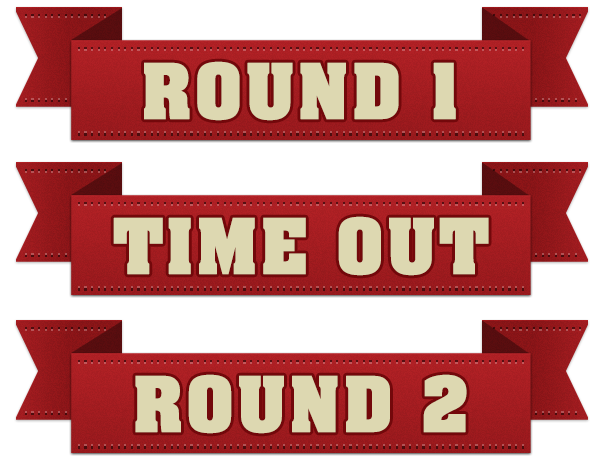
<style>
.page{position:relative;width:604px;height:465px;background:#ffffff}
.page>*{position:absolute;margin:0}
.t1{font:65.2px "AGAalenBold-Roman";letter-spacing:0.03em;color:#ddd8b1;text-transform:uppercase;font-weight:bold}
</style>
<div class="page">
<p class="t1" style="left:144px;top:61px;width:312px;height:60px">Round 1</p>
<p class="t1" style="left:113px;top:216px;width:376px;height:60px">Time out</p>
<p class="t1" style="left:135px;top:374px;width:332px;height:60px">round 2</p>
</div>
